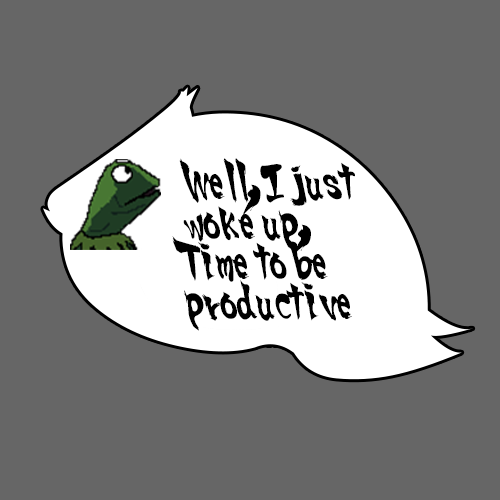
<style>
.page{position:relative;width:500px;height:500px;background:#666666}
.page>*{position:absolute;margin:0}
.t1{font:33.3px "SSF4-ABUKET-Regular";color:#000000;scale:0.75 1}
</style>
<div class="page">
<p class="t1" style="left:172px;top:158px;width:183px;height:173px">Well, I just <br>woke up, <br>Time to be productive</p>
</div>
